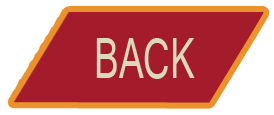
<style>
.page{position:relative;width:274px;height:115px;background:#a41c2b}
.page>*{position:absolute;margin:0}
.t1{font:59.7px "Shruti";color:#ded7bd;scale:0.67 1}
</style>
<div class="page">
<p class="t1" style="left:96px;top:38px;width:99px;height:41px">BACK</p>
</div>
